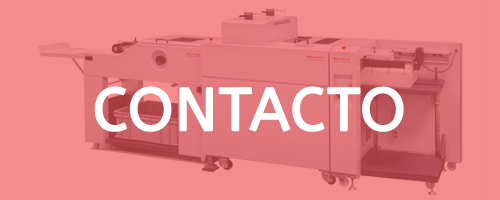
<style>
.page{position:relative;width:500px;height:200px;background:#f58b8d}
.page>*{position:absolute;margin:0}
.t1{font:60px "ABeeZee-Regular";color:#ffffff;font-weight:bold}
</style>
<div class="page">
<p class="t1" style="left:94px;top:86px;width:310px;height:46px">CONTACTO</p>
</div>
